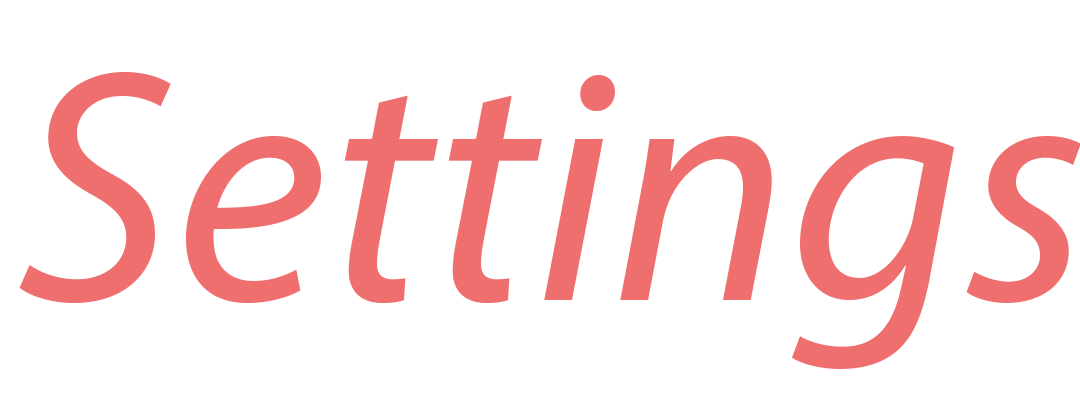
<style>
.page{position:relative;width:1080px;height:400px;background:#ffffff}
.page>*{position:absolute;margin:0}
.t1{font:333.3px "MyriadPro-It";color:#ef6e6e}
</style>
<div class="page">
<p class="t1" style="left:19px;top:72px;width:1062px;height:297px">Settings</p>
</div>
